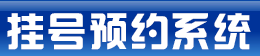
<style>
.page{position:relative;width:260px;height:56px;background:#ffffff}
.page>*{position:absolute;margin:0}
.t1{font:39px "¹ã½Ý¾ÓÃÔÄã×Ö¿â";letter-spacing:0.06em;color:#ffffff}
</style>
<div class="page">
<p class="t1" style="left:7px;top:13px;width:244px;height:37px">挂号预约系统</p>
</div>
